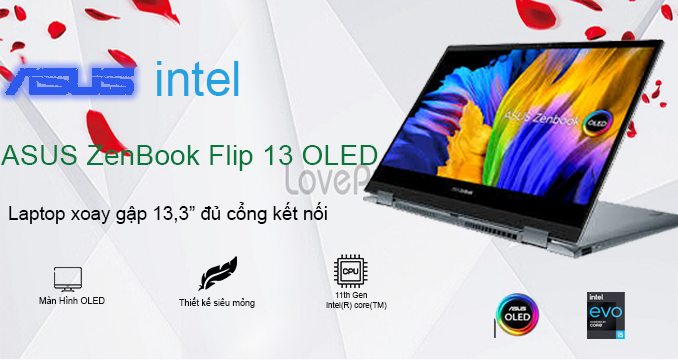
<style>
.page{position:relative;width:678px;height:360px}
.page>*{position:absolute;margin:0}
.t1{font:48px "ArialMT";color:#26a1e1}
.t2{font:28.5px "ArialMT";color:#08773a}
.t3{font:18.8px "ArialMT";color:#020202}
.t4{font:8px "ArialMT";color:#121314}
.t5{font:9px "ArialMT";color:#121314}
</style>
<div class="page">
<p class="t1" style="left:157px;top:61px;width:82px;height:35px">intel</p>
<p class="t2" style="left:1px;top:145px;width:377px;height:26px">ASUS ZenBook Flip 13 OLED</p>
<p class="t3" style="left:9px;top:202px;width:318px;height:22px">Laptop xoay gập 13,3” đủ cổng kết nối</p>
<p class="t4" style="left:326px;top:291px;width:61px;height:19px">11th Gen<br> intel(R) core(TM)</p>
<p class="t5" style="left:39px;top:296px;width:66px;height:8px">Màn Hình OLED</p>
<p class="t5" style="left:179px;top:297px;width:76px;height:11px">Thiết kế siêu mỏng</p>
</div>
